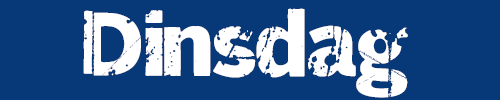
<style>
.page{position:relative;width:500px;height:100px;background:#073878}
.page>*{position:absolute;margin:0}
.t1{font:60px "321Perfect";color:#ffffff}
</style>
<div class="page">
<p class="t1" style="left:83px;top:8px;width:325px;height:90px">Dinsdag</p>
</div>
